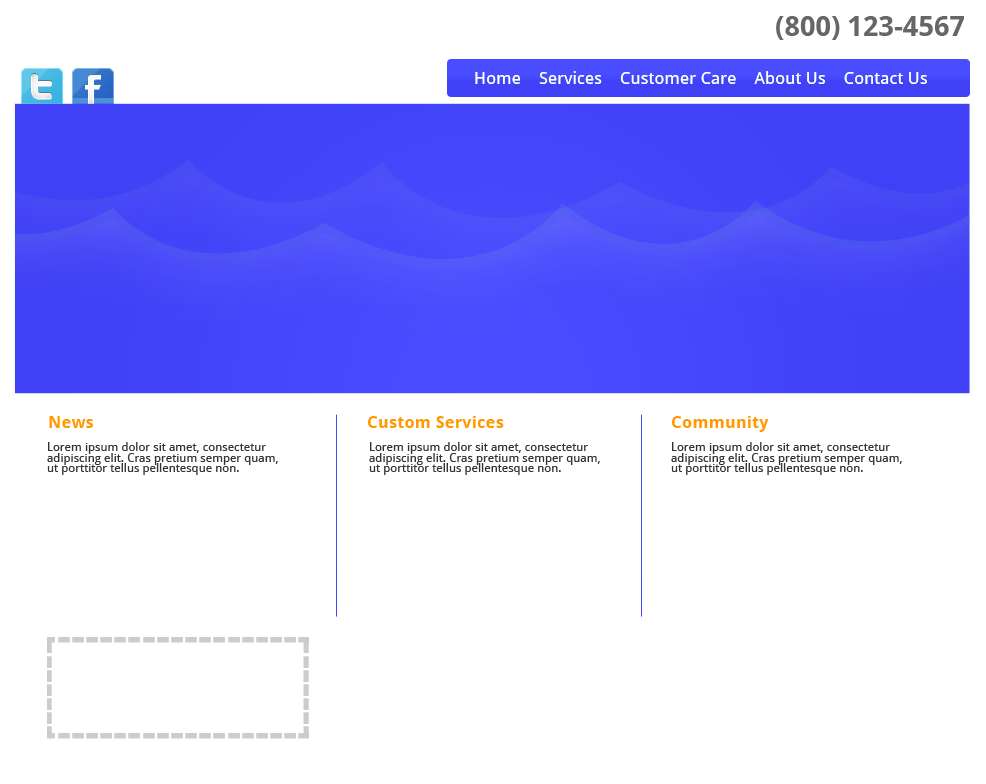
<style>
.page{position:relative;width:986px;height:784px;background:#ffffff}
.page>*{position:absolute;margin:0}
.t1{font:28px "DroidSans-Bold";color:#666666}
.t2{font:17.3px "DroidSans";color:#ffffff}
.t3{font:17.3px "DroidSans-Bold";color:#ff9900}
.t4{font:12px/10.7px "DroidSans";color:#333333}
.t5{font:44px "DroidSans-Bold"}
</style>
<div class="page">
<p class="t1" style="left:776px;top:16px;width:188px;height:24px">(800) 123-4567</p>
<p class="t2" style="left:475px;top:71px;width:452px;height:13px">Home    Services    Customer Care    About Us    Contact Us</p>
<p class="t2" style="left:475px;top:71px;width:452px;height:13px">Home    Services    Customer Care    About Us    Contact Us</p>
<p class="t3" style="left:49px;top:416px;width:44px;height:12px">News</p>
<p class="t3" style="left:368px;top:416px;width:136px;height:12px">Custom Services</p>
<p class="t3" style="left:672px;top:416px;width:97px;height:16px">Community</p>
<p class="t4" style="left:47px;top:442px;width:231px;height:33px">Lorem ipsum dolor sit amet, consectetur adipiscing elit. Cras pretium semper quam, ut porttitor tellus pellentesque non.</p>
<p class="t4" style="left:369px;top:442px;width:231px;height:33px">Lorem ipsum dolor sit amet, consectetur adipiscing elit. Cras pretium semper quam, ut porttitor tellus pellentesque non.</p>
<p class="t4" style="left:671px;top:442px;width:231px;height:33px">Lorem ipsum dolor sit amet, consectetur adipiscing elit. Cras pretium semper quam, ut porttitor tellus pellentesque non.</p>
<p class="t5" style="left:1px;top:637px;width:479px;height:6px">----------------------------------</p>
<p class="t5" style="left:1px;top:733px;width:479px;height:6px">----------------------------------</p>
</div>
